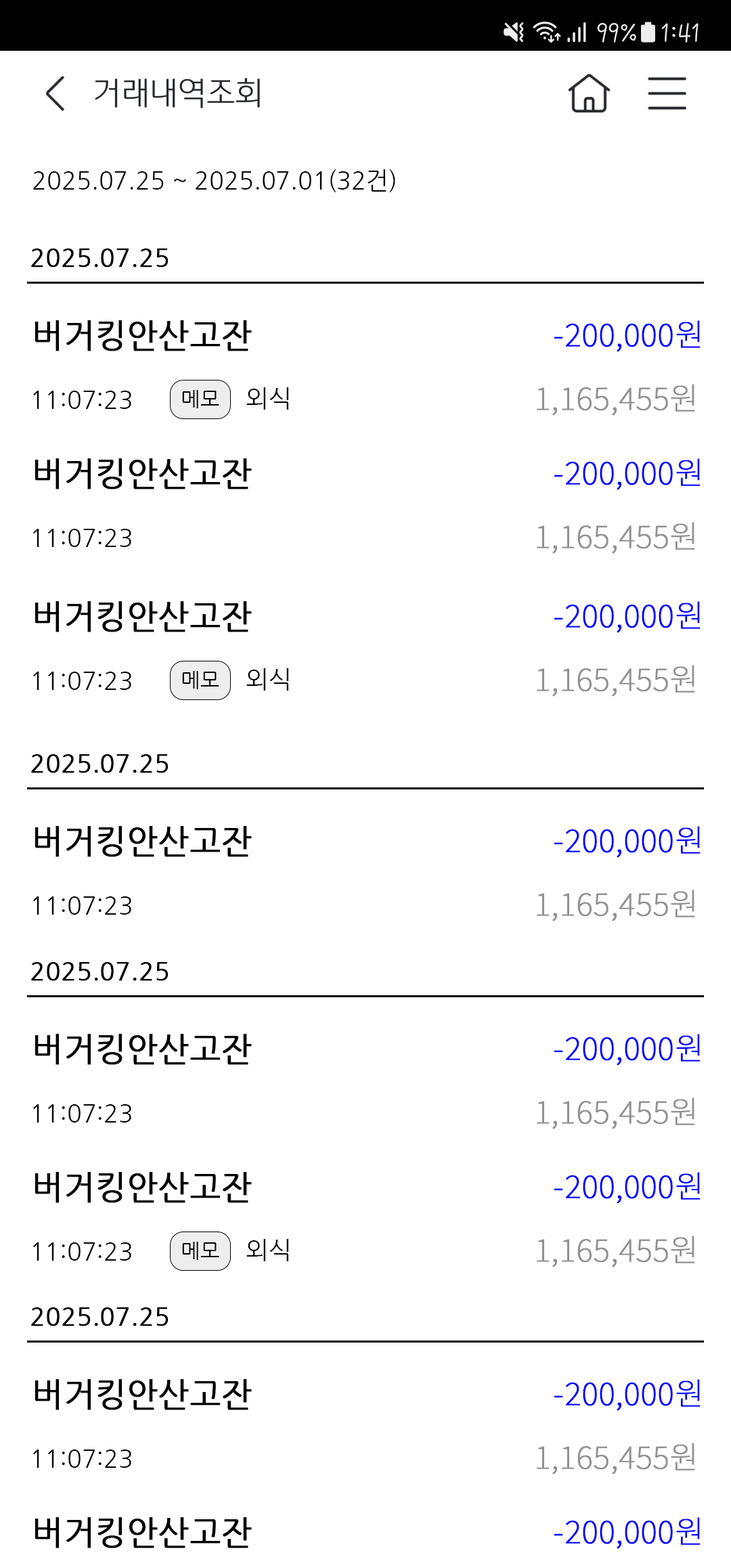
<style>
.page{position:relative;width:731px;height:1568px;background:#ffffff}
.page>*{position:absolute;margin:0}
.t1{font:24.4px "NanumGothic";color:#000000}
.t2{font:24.4px "NanumGothic";color:#000000;font-weight:bold}
.t3{font:32.5px "NanumGothic";color:#000000;font-weight:bold}
.t4{font:31.1px "NotoSansKR-Thin";color:#0000ff;font-weight:bold}
.t5{font:20.3px "NanumGothic";color:#000000}
.t6{font:31.1px "NotoSansKR-Thin";color:#919191;font-weight:bold}
</style>
<div class="page">
<p class="t1" style="left:33px;top:169px;width:362px;height:23px">2025.07.25 ~ 2025.07.01(32건)</p>
<p class="t2" style="left:31px;top:248px;width:138px;height:19px">2025.07.25</p>
<p class="t3" style="left:35px;top:320px;width:217px;height:31px">버거킹안산고잔</p>
<p class="t4" style="left:554px;top:320px;width:147px;height:32px">-200,000원</p>
<p class="t5" style="left:182px;top:390px;width:37px;height:18px">메모</p>
<p class="t1" style="left:246px;top:387px;width:42px;height:23px">외식</p>
<p class="t6" style="left:537px;top:384px;width:158px;height:32px">1,165,455원</p>
<p class="t1" style="left:33px;top:391px;width:98px;height:18px">11:07:23</p>
<p class="t3" style="left:35px;top:458px;width:217px;height:31px">버거킹안산고잔</p>
<p class="t4" style="left:554px;top:458px;width:147px;height:32px">-200,000원</p>
<p class="t6" style="left:537px;top:522px;width:158px;height:32px">1,165,455원</p>
<p class="t1" style="left:33px;top:529px;width:98px;height:18px">11:07:23</p>
<p class="t3" style="left:35px;top:601px;width:217px;height:31px">버거킹안산고잔</p>
<p class="t4" style="left:554px;top:601px;width:147px;height:32px">-200,000원</p>
<p class="t6" style="left:537px;top:665px;width:158px;height:32px">1,165,455원</p>
<p class="t1" style="left:33px;top:672px;width:98px;height:18px">11:07:23</p>
<p class="t5" style="left:182px;top:671px;width:37px;height:18px">메모</p>
<p class="t1" style="left:246px;top:668px;width:42px;height:23px">외식</p>
<p class="t2" style="left:31px;top:754px;width:138px;height:19px">2025.07.25</p>
<p class="t3" style="left:35px;top:826px;width:217px;height:31px">버거킹안산고잔</p>
<p class="t4" style="left:554px;top:826px;width:147px;height:32px">-200,000원</p>
<p class="t6" style="left:537px;top:890px;width:158px;height:31px">1,165,455원</p>
<p class="t1" style="left:33px;top:896px;width:98px;height:19px">11:07:23</p>
<p class="t2" style="left:31px;top:962px;width:138px;height:19px">2025.07.25</p>
<p class="t3" style="left:35px;top:1034px;width:217px;height:31px">버거킹안산고잔</p>
<p class="t4" style="left:554px;top:1034px;width:147px;height:32px">-200,000원</p>
<p class="t6" style="left:537px;top:1097px;width:158px;height:32px">1,165,455원</p>
<p class="t1" style="left:33px;top:1104px;width:98px;height:19px">11:07:23</p>
<p class="t3" style="left:35px;top:1172px;width:217px;height:31px">버거킹안산고잔</p>
<p class="t4" style="left:554px;top:1172px;width:147px;height:32px">-200,000원</p>
<p class="t5" style="left:182px;top:1242px;width:37px;height:18px">메모</p>
<p class="t1" style="left:246px;top:1239px;width:42px;height:22px">외식</p>
<p class="t6" style="left:537px;top:1236px;width:158px;height:31px">1,165,455원</p>
<p class="t1" style="left:33px;top:1242px;width:98px;height:19px">11:07:23</p>
<p class="t2" style="left:31px;top:1307px;width:138px;height:19px">2025.07.25</p>
<p class="t3" style="left:35px;top:1379px;width:217px;height:31px">버거킹안산고잔</p>
<p class="t4" style="left:554px;top:1379px;width:147px;height:32px">-200,000원</p>
<p class="t6" style="left:537px;top:1443px;width:158px;height:32px">1,165,455원</p>
<p class="t1" style="left:33px;top:1450px;width:98px;height:18px">11:07:23</p>
<p class="t3" style="left:35px;top:1517px;width:217px;height:31px">버거킹안산고잔</p>
<p class="t4" style="left:554px;top:1517px;width:147px;height:32px">-200,000원</p>
</div>
